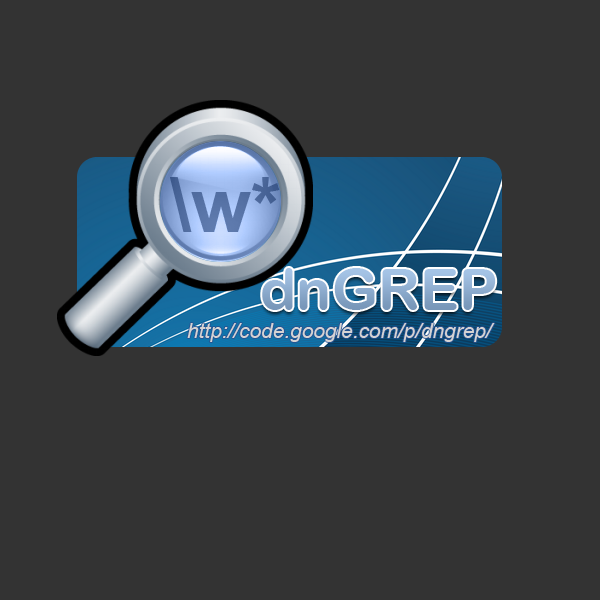
<style>
.page{position:relative;width:600px;height:600px;background:#333333}
.page>*{position:absolute;margin:0}
.t1{font:76.6px "Arial-BoldMT";color:#5571a4}
.t2{font:20.8px "Arial-ItalicMT";color:#d6d3d3}
</style>
<div class="page">
<p class="t1" style="left:170px;top:177px;width:110px;height:55px">\w*</p>
<p class="t2" style="left:187px;top:323px;width:308px;height:19px">http://code.google.com/p/dngrep/</p>
</div>
